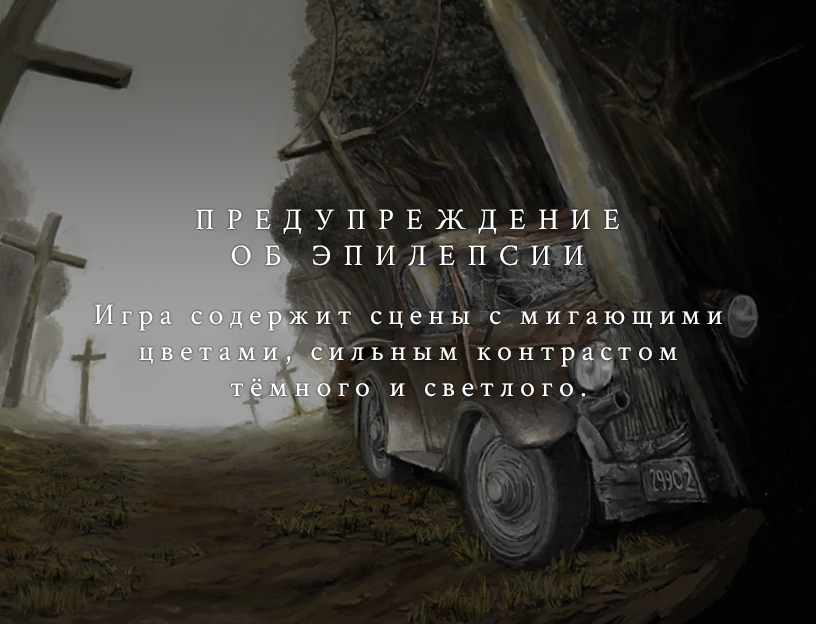
<style>
.page{position:relative;width:816px;height:624px}
.page>*{position:absolute;margin:0}
.t1{font:30px "CrimsonText-Regular";letter-spacing:0.4em;color:#ffffff}
.t2{font:30px "CrimsonText-Regular";letter-spacing:0.2em;color:#ffffff}
</style>
<div class="page">
<p class="t1" style="left:196px;top:209px;width:423px;height:57px;text-align:center">ПРЕДУПРЕЖДЕНИЕ<br>ОБ ЭПИЛЕПСИИ</p>
<p class="t2" style="left:94px;top:304px;width:628px;height:93px;text-align:center">Игра содержит сцены с мигающими<br>цветами, сильным контрастом<br>тёмного и светлого.</p>
</div>
